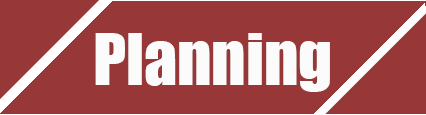
<style>
.page{position:relative;width:426px;height:115px;background:#983737}
.page>*{position:absolute;margin:0}
.t1{font:65.6px "Impact";color:#fbfbfb}
</style>
<div class="page">
<p class="t1" style="left:95px;top:33px;width:235px;height:59px">Planning</p>
</div>
